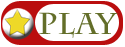
<style>
.page{position:relative;width:125px;height:47px;background:#ffffff}
.page>*{position:absolute;margin:0}
.t1{font:30px "CharlemagneStd-Bold";color:#636e29}
</style>
<div class="page">
<p class="t1" style="left:39px;top:12px;width:79px;height:26px">Play</p>
</div>
